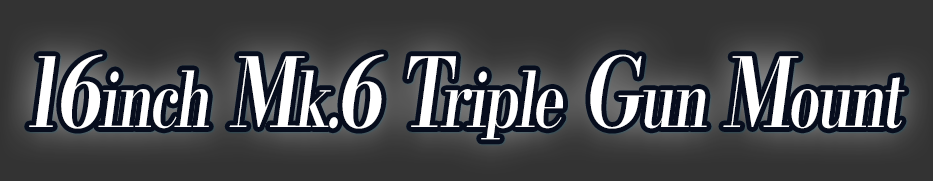
<style>
.page{position:relative;width:933px;height:181px;background:#333333}
.page>*{position:absolute;margin:0}
.t1{font:76.8px "KochoStd-Heavy";letter-spacing:-0.04em;color:#ffffff;font-style:italic;scale:0.75 1}
.t2{font:96px "KochoStd-Heavy";letter-spacing:-0.04em;color:#ffffff;font-style:italic;scale:0.75 1}
</style>
<div class="page">
<p class="t1" style="left:29px;top:54px;width:876px;height:86px"><span class="t2">16</span>inch<span class="t2"> M</span>k.<span class="t2">6 T</span>riple<span class="t2"> G</span>un <span class="t2">M</span>ount</p>
</div>
